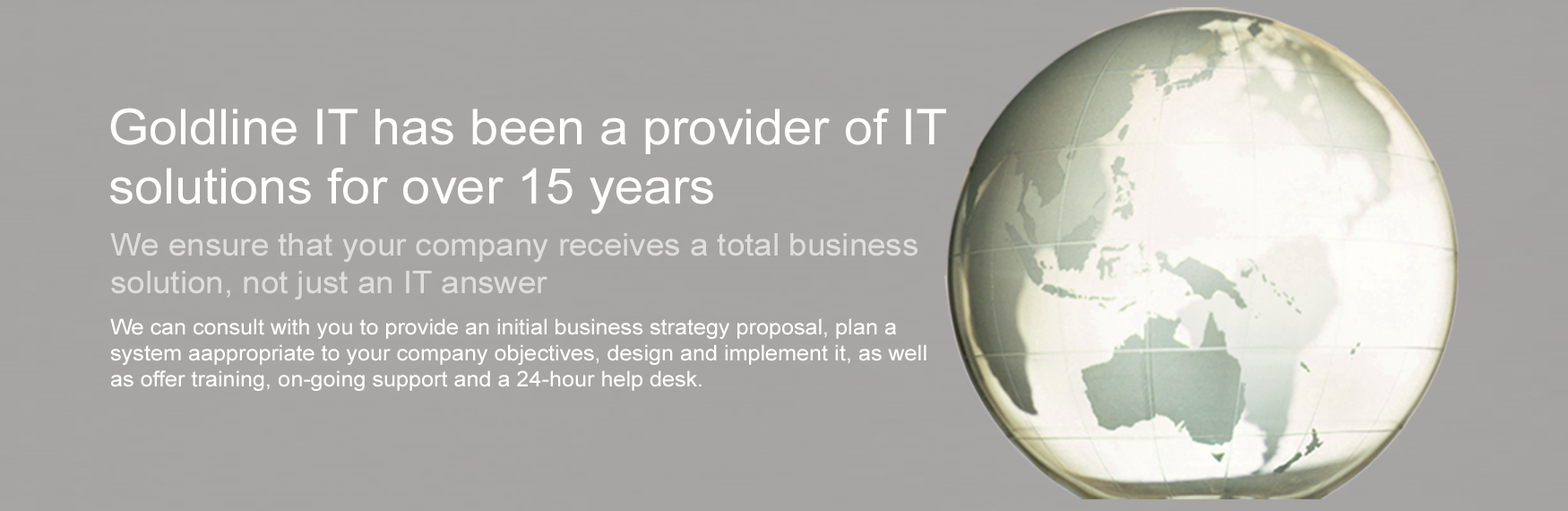
<style>
.page{position:relative;width:1568px;height:511px;background:#a6a5a3}
.page>*{position:absolute;margin:0}
.t1{font:49.3px "ArialMT";color:#fefefe;scale:1.05 1}
.t2{font:31.4px "ArialMT";color:#dedede;scale:1.05 1}
.t3{font:21.5px "ArialMT";color:#ffffff;scale:1.05 1}
</style>
<div class="page">
<p class="t1" style="left:110px;top:108px;width:836px;height:106px">Goldline IT has been a provider of IT<br>solutions for over 15 years</p>
<p class="t2" style="left:110px;top:233px;width:808px;height:67px">We ensure that your company receives a total business<br>solution, not just an IT answer</p>
<p class="t3" style="left:110px;top:318px;width:816px;height:73px">We can consult with you to provide an initial business strategy proposal, plan a<br>system aappropriate to your company objectives, design and implement it, as well<br>as offer training, on-going support and a 24-hour help desk.</p>
</div>
